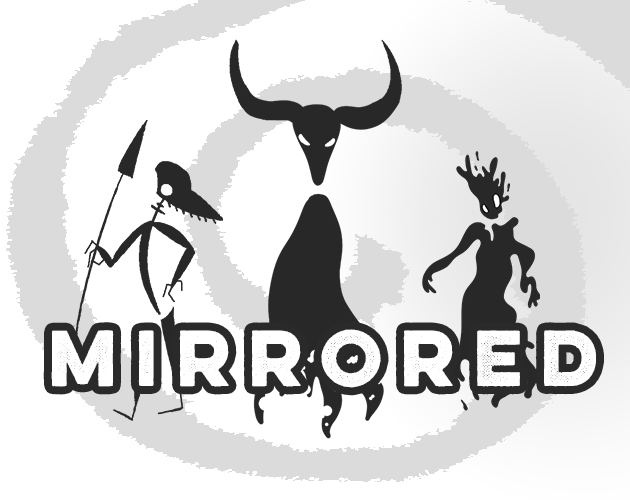
<style>
.page{position:relative;width:630px;height:500px;background:#ffffff}
.page>*{position:absolute;margin:0}
.t1{font:70.8px "LuloOne-Bold";letter-spacing:0.025em;color:#ffffff}
</style>
<div class="page">
<p class="t1" style="left:51px;top:329px;width:545px;height:59px">mirrored</p>
</div>
